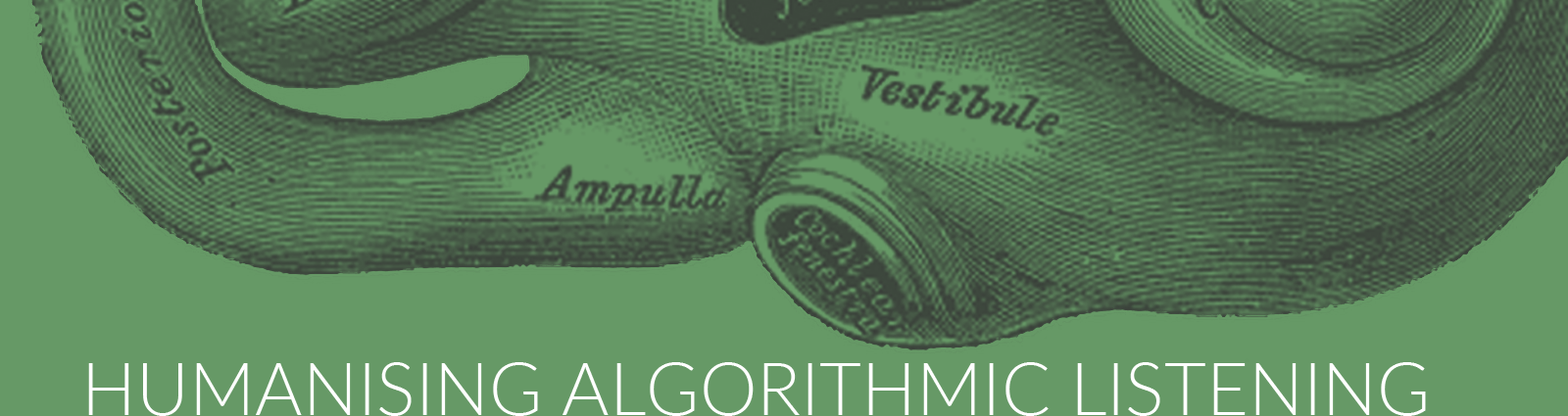
<style>
.page{position:relative;width:1568px;height:416px;background:#669966}
.page>*{position:absolute;margin:0}
.t1{font:72.5px "Lato-Light";color:#ffffff}
</style>
<div class="page">
<p class="t1" style="left:88px;top:363px;width:1338px;height:53px">HUMANISING ALGORITHMIC LISTENING</p>
</div>
